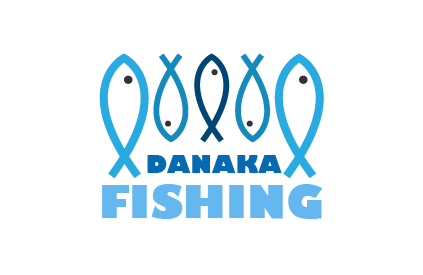
<style>
.page{position:relative;width:423px;height:275px;background:#ffffff}
.page>*{position:absolute;margin:0}
.t1{font:23.9px "GillSans-UltraBold";color:#056ab1}
.t2{font:44.2px "GillSans-UltraBold";color:#65b7f0}
</style>
<div class="page">
<p class="t1" style="left:147px;top:155px;width:135px;height:18px">DANAKA</p>
<p class="t2" style="left:102px;top:184px;width:221px;height:35px">FISHING</p>
</div>
